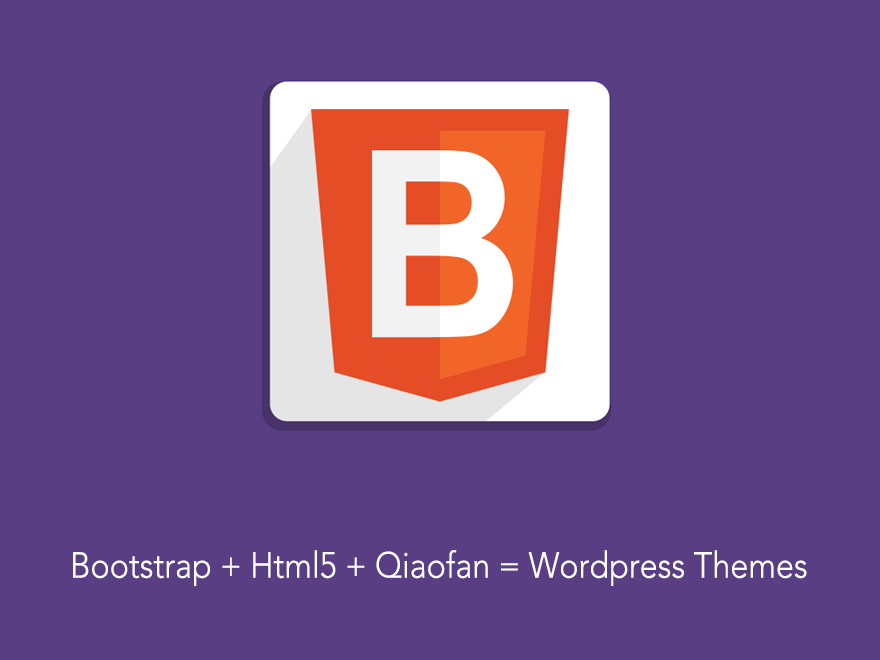
<style>
.page{position:relative;width:880px;height:660px;background:#593e84}
.page>*{position:absolute;margin:0}
.t1{font:36px "Avenir-Light";color:#ffffff;scale:0.9 1}
</style>
<div class="page">
<p class="t1" style="left:73px;top:550px;width:734px;height:36px">Bootstrap + Html5 + Qiaofan = Wordpress Themes</p>
</div>
